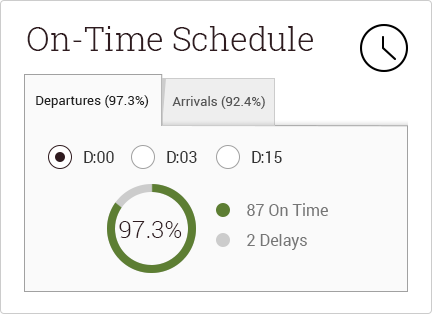
<style>
.page{position:relative;width:432px;height:314px;background:#fafafa}
.page>*{position:absolute;margin:0}
.t1{font:33px "RobotoSlab-Light";color:#2f1b1f}
.t2{font:13px "Roboto-Regular";color:#222222}
.t3{font:13px "Roboto-Regular";color:#555555}
.t4{font:16px "Roboto-Regular";color:#333333}
.t5{font:16px "Roboto-Regular";color:#767676}
.t6{font:24px "Roboto-Light";color:#2f1b1f}
</style>
<div class="page">
<p class="t1" style="left:27px;top:26px;width:286px;height:25px">On-Time Schedule</p>
<p class="t2" style="left:36px;top:95px;width:113px;height:13px">Departures (97.3%)</p>
<p class="t3" style="left:172px;top:96px;width:93px;height:13px">Arrivals (92.4%)</p>
<p class="t4" style="left:84px;top:151px;width:30px;height:12px">D:00</p>
<p class="t4" style="left:167px;top:151px;width:30px;height:12px">D:03</p>
<p class="t4" style="left:252px;top:151px;width:30px;height:12px">D:15</p>
<p class="t5" style="left:247px;top:203px;width:81px;height:13px">87 On Time</p>
<p class="t6" style="left:119px;top:221px;width:63px;height:17px">97.3%</p>
<p class="t5" style="left:247px;top:234px;width:60px;height:16px">2 Delays</p>
</div>
